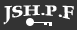
<style>
.page{position:relative;width:77px;height:30px;background:#333333}
.page>*{position:absolute;margin:0}
.t1{font:20px "BookAntiqua-Bold";color:#ffffff}
</style>
<div class="page">
<p class="t1" style="left:3px;top:5px;width:71px;height:20px">JSH.P.F</p>
</div>
